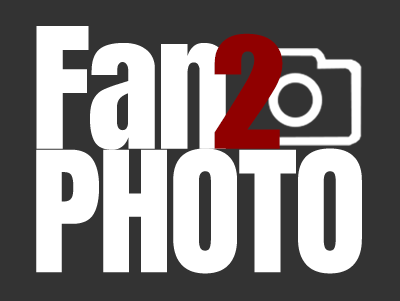
<style>
.page{position:relative;width:400px;height:301px;background:#333333}
.page>*{position:absolute;margin:0}
.t1{font:142.5px "Anton-Regular";letter-spacing:-0.025em;color:#ffffff;scale:1.05 1}
.t2{font:142.5px "Impact";letter-spacing:-0.025em;color:#900000;scale:1.05 1}
</style>
<div class="page">
<p class="t1" style="left:36px;top:26px;width:190px;height:124px">Fan</p>
<p class="t2" style="left:214px;top:33px;width:69px;height:116px">2</p>
<p class="t1" style="left:36px;top:148px;width:326px;height:126px">PHOTO</p>
</div>
